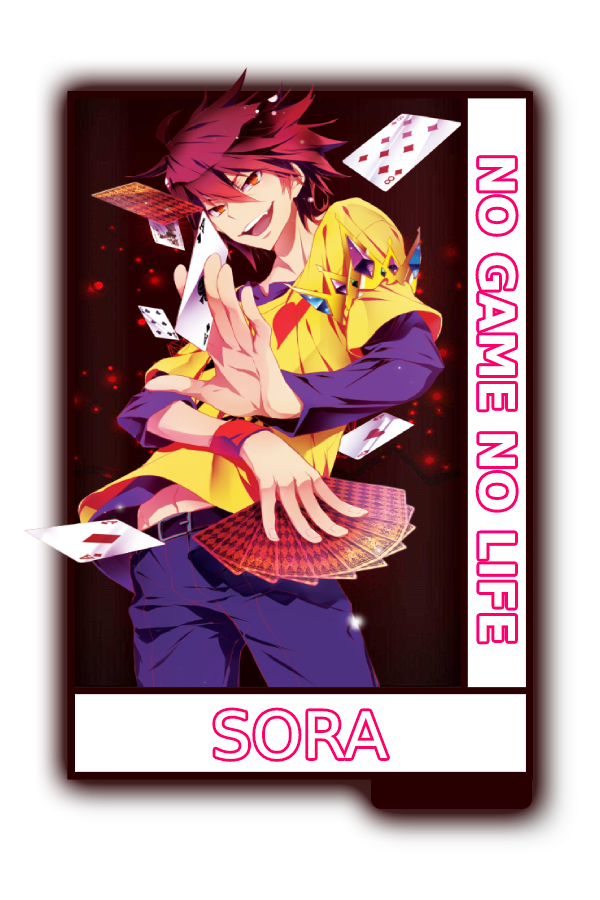
<style>
.page{position:relative;width:600px;height:900px;background:#ffffff}
.page>*{position:absolute;margin:0}
.t1{font:48.8px "MADETOMMY-Bold";color:#ffffff}
.t2{font:64px "CoolveticaRg-Regular";color:#ffffff}
</style>
<div class="page">
<p class="t1" style="left:478px;top:158px;width:38px;height:484px;rotate:90deg">NO GAME NO LIFE</p>
<p class="t2" style="left:215px;top:710px;width:173px;height:49px">SORA</p>
</div>
